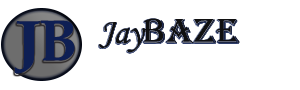
<style>
.page{position:relative;width:300px;height:90px;background:#ffffff}
.page>*{position:absolute;margin:0}
.t1{font:58.2px "BookAntiqua-Bold";color:#0e1f54;scale:1.23 1}
.t2{font:58.2px "BookAntiqua-Bold";color:#0e1f54}
.t3{font:36px "Algerian";color:#101011}
.t4{font:36px "MonotypeCorsiva";color:#101011}
</style>
<div class="page">
<p class="t1" style="left:14px;top:21px;width:27px;height:53px">J</p>
<p class="t2" style="left:40px;top:20px;width:35px;height:41px">B</p>
<p class="t3" style="left:99px;top:18px;width:141px;height:35px"><span class="t4">Jay</span>Baze</p>
</div>
